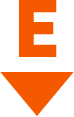
<style>
.page{position:relative;width:74px;height:117px;background:#ffffff}
.page>*{position:absolute;margin:0}
.t1{font:84.4px "DDCHardware-Regular";letter-spacing:0.8em;color:#f45900}
</style>
<div class="page">
<p class="t1" style="left:19px;top:0px;width:38px;height:57px">E</p>
</div>
